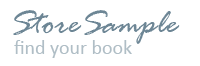
<style>
.page{position:relative;width:200px;height:66px;background:#ffffff}
.page>*{position:absolute;margin:0}
.t1{font:36px "RageItalic";color:#6d8695}
.t2{font:20px "Calibri";color:#b0bec6}
</style>
<div class="page">
<p class="t1" style="left:13px;top:10px;width:167px;height:34px">StoreSample</p>
<p class="t2" style="left:14px;top:40px;width:118px;height:18px">find your book</p>
</div>
